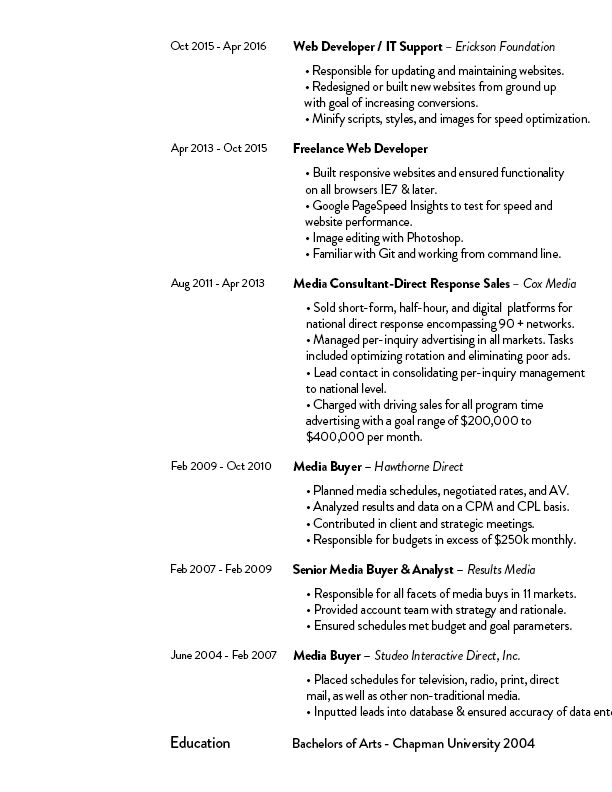
<style>
.page{position:relative;width:612px;height:792px;background:#ffffff}
.page>*{position:absolute;margin:0}
.t1{font:12px "BrandonGrotesque-Regular";letter-spacing:-0.02em;color:#000000}
.t2{font:14px "BrandonGrotesque-Black";letter-spacing:-0.02em;color:#000000}
.t3{font:14px "BrandonGrotesque-RegularItalic";letter-spacing:-0.02em;color:#000000}
.t4{font:13.5px "BrandonGrotesque-Regular";letter-spacing:-0.02em;color:#000000}
.t5{font:14px "BrandonGrotesque-Regular";letter-spacing:-0.02em;color:#000000}
.t6{font:16px "BrandonGrotesque-Medium";letter-spacing:-0.02em;color:#000000}
.t7{font:14px "BrandonGrotesque-Medium";letter-spacing:-0.02em;color:#000000}
</style>
<div class="page">
<p class="t1" style="left:170px;top:41px;width:97px;height:13px">Oct 2015 - Apr 2016</p>
<p class="t2" style="left:293px;top:41px;width:262px;height:14px">Web Developer / IT Support<span class="t3"> – Erickson Foundation</span></p>
<p class="t4" style="left:304px;top:65px;width:286px;height:62px">• Responsible for updating and maintaining websites.<br>• Redesigned or built new websites from ground up<br>with goal of increasing conversions.<br>• Minify scripts, styles, and images for speed optimization.</p>
<p class="t1" style="left:171px;top:143px;width:96px;height:13px">Apr 2013 - Oct 2015</p>
<p class="t2" style="left:293px;top:143px;width:135px;height:14px">Freelance Web Developer</p>
<p class="t4" style="left:305px;top:167px;width:260px;height:95px">• Built responsive websites and ensured functionality<br>on all browsers IE7 &amp; later.<br>• Google PageSpeed Insights to test for speed and<br>website performance.<br>• Image editing with Photoshop.<br>• Familiar with Git and working from command line.</p>
<p class="t1" style="left:171px;top:278px;width:94px;height:13px">Aug 2011 - Apr 2013</p>
<p class="t2" style="left:293px;top:278px;width:283px;height:14px">Media Consultant-Direct Response Sales<span class="t3"> – Cox Media</span></p>
<p class="t4" style="left:306px;top:302px;width:279px;height:143px">• Sold short-form, half-hour, and digital  platforms for<br>national direct response encompassing 90 + networks. <br>• Managed per-inquiry advertising in all markets. Tasks<br>included optimizing rotation and eliminating poor ads.<br>• Lead contact in consolidating per-inquiry management<br>to national level.<br>• Charged with driving sales for all program time<br>advertising with a goal range of $200,000 to<br>$400,000 per month.</p>
<p class="t1" style="left:171px;top:461px;width:101px;height:10px">Feb 2009 - Oct 2010</p>
<p class="t3" style="left:293px;top:461px;width:171px;height:14px"><span class="t2">Media Buyer</span><span class="t5"> – </span>Hawthorne Direct</p>
<p class="t4" style="left:306px;top:485px;width:270px;height:63px">• Planned media schedules, negotiated rates, and AV. <br>• Analyzed results and data on a CPM and CPL basis.<br>• Contributed in client and strategic meetings.<br>• Responsible for budgets in excess of $250k monthly.</p>
<p class="t1" style="left:171px;top:564px;width:101px;height:10px">Feb 2007 - Feb 2009</p>
<p class="t2" style="left:293px;top:564px;width:242px;height:14px">Senior Media Buyer &amp; Analyst <span class="t5">– </span><span class="t3">Results Media</span></p>
<p class="t4" style="left:307px;top:588px;width:269px;height:46px">• Responsible for all facets of media buys in 11 markets.<br>• Provided account team with strategy and rationale.<br>• Ensured schedules met budget and goal parameters.</p>
<p class="t1" style="left:170px;top:650px;width:107px;height:9px">June 2004 - Feb 2007</p>
<p class="t3" style="left:293px;top:650px;width:227px;height:14px"><span class="t2">Media Buyer </span><span class="t5">– </span>Studeo Interactive Direct, Inc.</p>
<p class="t6" style="left:171px;top:736px;width:59px;height:12px">Education</p>
<p class="t7" style="left:293px;top:738px;width:242px;height:14px">Bachelors of Arts - Chapman University 2004</p>
</div>
